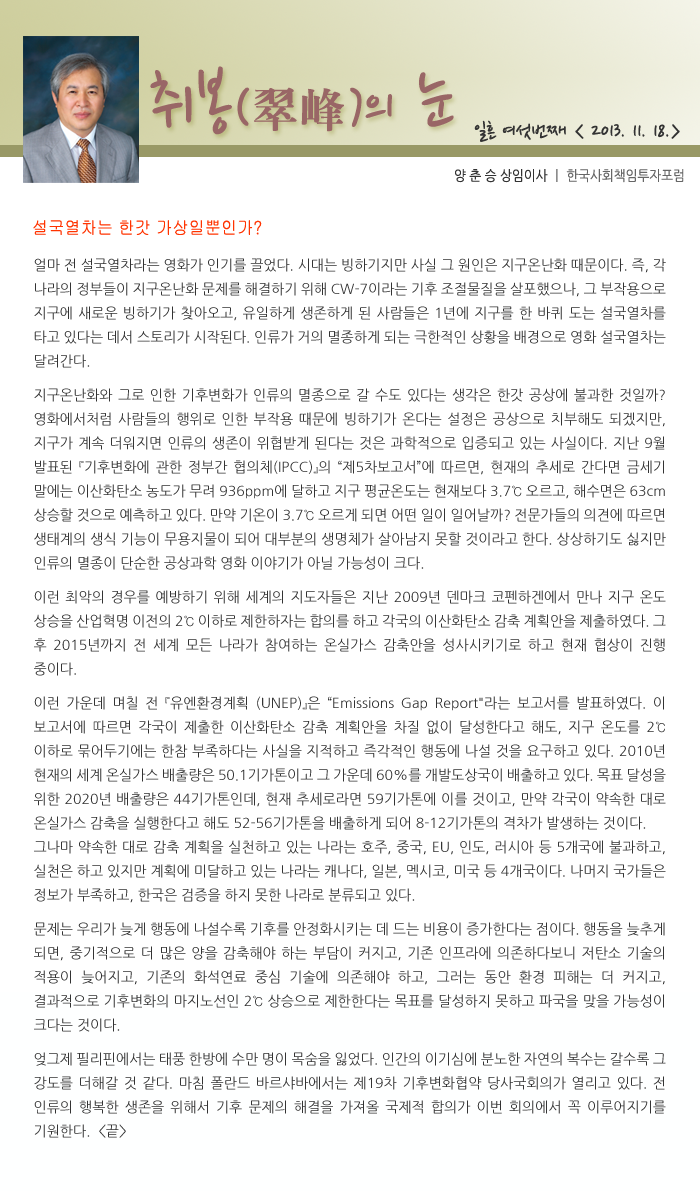
<style>
.page{position:relative;width:700px;height:1191px;background:#ffffff}
.page>*{position:absolute;margin:0}
.t1{font:77.5px "NanumPen";color:#996666}
.t2{font:60px "NanumPen";color:#996666}
.t3{font:48px "H2mjrE";color:#996666}
.t4{font:24px "NanumPen";color:#333333}
.t5{font:14px "NanumGothic";color:#666666;scale:0.9 1}
.t6{font:14px "NanumGothic";color:#333333;scale:0.9 1}
.t7{font:18px "Gulim";color:#ff3300;scale:0.9 1}
.t8{font:14px/24px "NanumGothic";color:#333333}
.t9{font:14px/10px "NanumGothic";color:#333333}
</style>
<div class="page">
<p class="t1" style="left:150px;top:66px;width:304px;height:69px">취봉<span class="t2">(</span><span class="t3">翠峰</span><span class="t2">)</span><span class="t2">의</span> 눈</p>
<p class="t4" style="left:474px;top:120px;width:206px;height:22px">일흔 여섯번째 &lt; 2013. 11. 18.&gt;</p>
<p class="t5" style="left:455px;top:169px;width:229px;height:14px"><span class="t6">양 춘 승 상임이사 </span>ㅣ 한국사회책임투자포럼</p>
<p class="t7" style="left:33px;top:220px;width:229px;height:15px">설국열차는 한갓 가상일뿐인가?</p>
<p class="t8" style="left:34px;top:258px;width:632px;height:880px;text-align:justify">얼마 전 설국열차라는 영화가 인기를 끌었다. 시대는 빙하기지만 사실 그 원인은 지구온난화 때문이다. 즉, 각 나라의 정부들이 지구온난화 문제를 해결하기 위해 CW-7이라는 기후 조절물질을 살포했으나, 그 부작용으로 지구에 새로운 빙하기가 찾아오고, 유일하게 생존하게 된 사람들은 1년에 지구를 한 바퀴 도는 설국열차를 타고 있다는 데서 스토리가 시작된다. 인류가 거의 멸종하게 되는 극한적인 상황을 배경으로 영화 설국열차는 달<span class="t9">려간다.<br><br>지구온난화와 그로 인한 기</span>후변화가 인류의 멸종으로 갈 수도 있다는 생각은 한갓 공상에 불과한 것일까? 영화에서처럼 사람들의 행위로 인한 부작용 때문에 빙하기가 온다는 설정은 공상으로 치부해도 되겠지만, 지구가 계속 더워지면 인류의 생존이 위협받게 된다는 것은 과학적으로 입증되고 있는 사실이다. 지난 9월 발표된 『기후변화에 관한 정부간 협의체(IPCC)』의 “제5차보고서”에 따르면, 현재의 추세로 간다면 금세기 말에는 이산화탄소 농도가 무려 936ppm에 달하고 지구 평균온도는 현재보다 3.7℃ 오르고, 해수면은 63cm 상승할 것으로 예측하고 있다. 만약 기온이 3.7℃ 오르게 되면 어떤 일이 일어날까? 전문가들의 의견에 따르면 생태계의 생식 기능이 무용지물이 되어 대부분의 생명체가 살아남지 못할 것이라고 한다. 상상하기도 싫지만 인류의 멸종이 단순한 공상과학 <span class="t9">영화 이야기가 아닐 가능성이 크다.<br><br>이런 최악의 경우를 예방하기 위해 세계</span>의 지도자들은 지난 2009년 덴마크 코펜하겐에서 만나 지구 온도 상승을 산업혁명 이전의 2℃ 이하로 제한하자는 합의를 하고 각국의 이산화탄소 감축 계획안을 제출하였다. 그 후 2015년까지 전 세계 모든 나라가 참여하는 온실가스 감축안을 성사시키기로 하고 현재 협상이 진행 중<span class="t9">이다.<br><br>이런 가운데 </span>며칠 전 『유엔환경계획 (UNEP)』은 “Emissions Gap Report"라는 보고서를 발표하였다. 이 보고서에 따르면 각국이 제출한 이산화탄소 감축 계획안을 차질 없이 달성한다고 해도, 지구 온도를 2℃ 이하로 묶어두기에는 한참 부족하다는 사실을 지적하고 즉각적인 행동에 나설 것을 요구하고 있다. 2010년 현재의 세계 온실가스 배출량은 50.1기가톤이고 그 가운데 60%를 개발도상국이 배출하고 있다. 목표 달성을 위한 2020년 배출량은 44기가톤인데, 현재 추세로라면 59기가톤에 이를 것이고, 만약 각국이 약속한 대로 온실가스 감축을 실행한다고 해도 52-56기가톤을 배출하게 되어 8-12기가톤의 격차가 발생하는 것이다.<br>그나마 약속한 대로 감축 계획을 실천하고 있는 나라는 호주, 중국, EU, 인도, 러시아 등 5개국에 불과하고, 실천은 하고 있지만 계획에 미달하고 있는 나라는 캐나다, 일본, 멕시코, 미국 등 4개국이다. 나머지 국가들은 정보가 부족하고, 한국은 검증을 하지 <span class="t9">못한 나라로 분류되고 있다.<br><br>문제는 우리가 늦게 행동에 나설수록 기후를 </span>안정화시키는 데 드는 비용이 증가한다는 점이다. 행동을 늦추게 되면, 중기적으로 더 많은 양을 감축해야 하는 부담이 커지고, 기존 인프라에 의존하다보니 저탄소 기술의 적용이 늦어지고, 기존의 화석연료 중심 기술에 의존해야 하고, 그러는 동안 환경 피해는 더 커지고, 결과적으로 기후변화의 마지노선인 2℃ 상승으로 제한한다는 목표를 달성하지 못하고 파국을 맞을 가능성이 크다는<span class="t9"> 것이다.<br><br>엊그제 필리</span>핀에서는 태풍 한방에 수만 명이 목숨을 잃었다. 인간의 이기심에 분노한 자연의 복수는 갈수록 그 강도를 더해갈 것 같다. 마침 폴란드 바르샤바에서는 제19차 기후변화협약 당사국회의가 열리고 있다. 전 인류의 행복한 생존을 위해서 기후 문제의 해결을 가져올 국제적 합의가 이번 회의에서 꼭 이루어지기를 기원한다.  &lt;끝&gt;</p>
</div>
